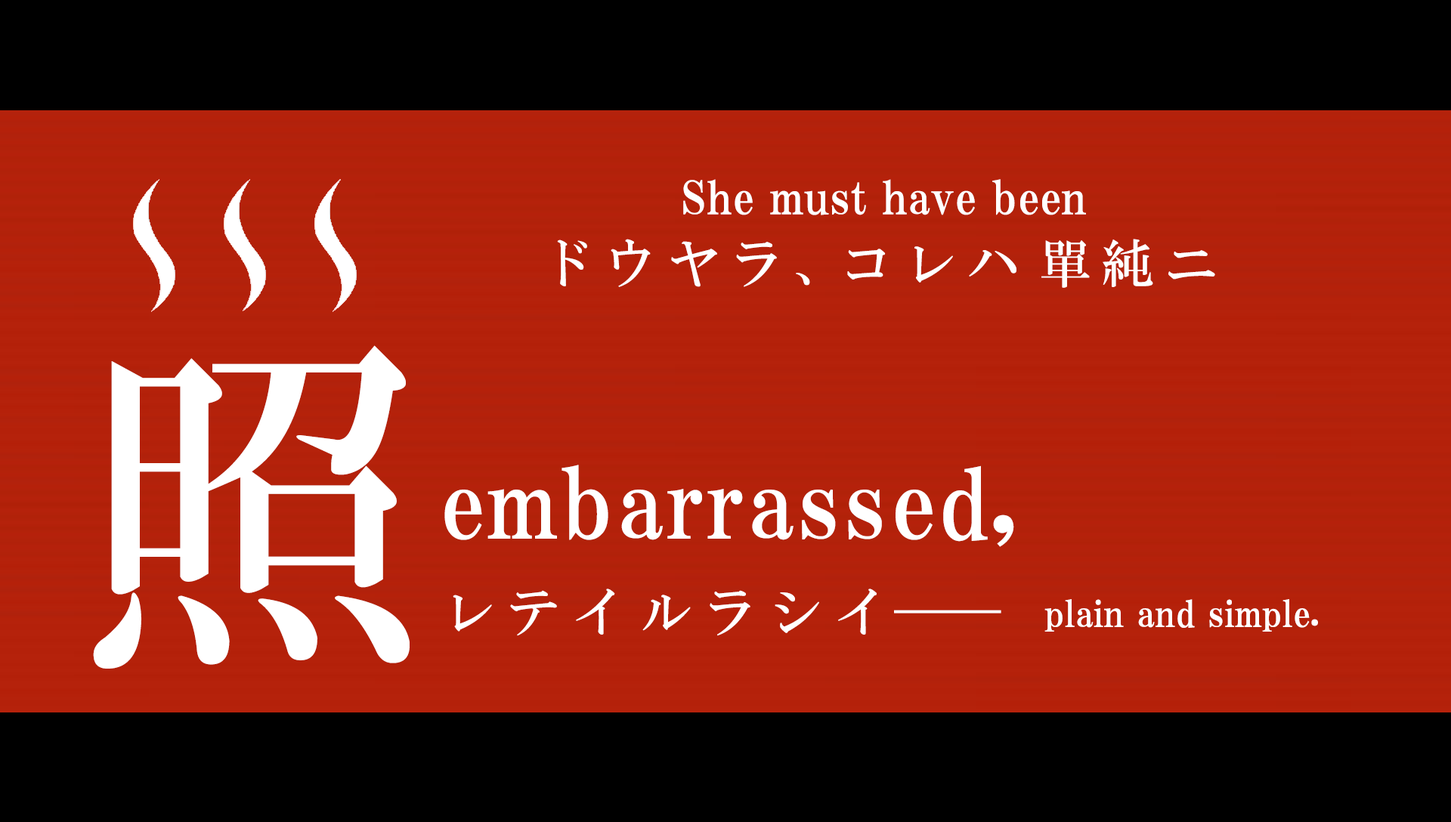
<style>
.page{position:relative;width:1451px;height:822px;background:#000000}
.page>*{position:absolute;margin:0}
.t1{font:45.3px "HGPMinchoE";letter-spacing:0.01em;color:#ffffff}
.t2{font:52.4px "HGMinchoB";letter-spacing:0.21em;color:#ffffff}
.t3{font:52.4px "HGMinchoB";letter-spacing:-0.13em;color:#ffffff}
.t4{font:52.4px "HGMinchoB";letter-spacing:0.37em;color:#ffffff}
.t5{font:357.6px "HGMinchoB";letter-spacing:0.25em;color:#ffffff}
.t6{font:95.7px "HGPMinchoE";letter-spacing:0.025em;color:#ffffff}
.t7{font:52.4px "HGMinchoB";letter-spacing:0.25em;color:#ffffff}
.t8{font:52.4px "HGMinchoB";letter-spacing:0.25em;color:#ffffff;scale:5.06 1}
.t9{font:36.3px "HGPMinchoE";letter-spacing:0.01em;color:#ffffff}
</style>
<div class="page">
<p class="t1" style="left:683px;top:179px;width:403px;height:36px">She must have been</p>
<p class="t2" style="left:557px;top:239px;width:658px;height:49px">ドウヤラ<span class="t3">、</span>コレ<span class="t4">ハ</span>單純ニ</p>
<p class="t5" style="left:93px;top:345px;width:316px;height:324px">照</p>
<p class="t6" style="left:444px;top:465px;width:570px;height:82px">embarrassed,</p>
<p class="t7" style="left:453px;top:589px;width:548px;height:47px">レテイルラシ<span class="t3">イ</span><span class="t8">-</span></p>
<p class="t9" style="left:1044px;top:599px;width:274px;height:33px">plain and simple.</p>
</div>
